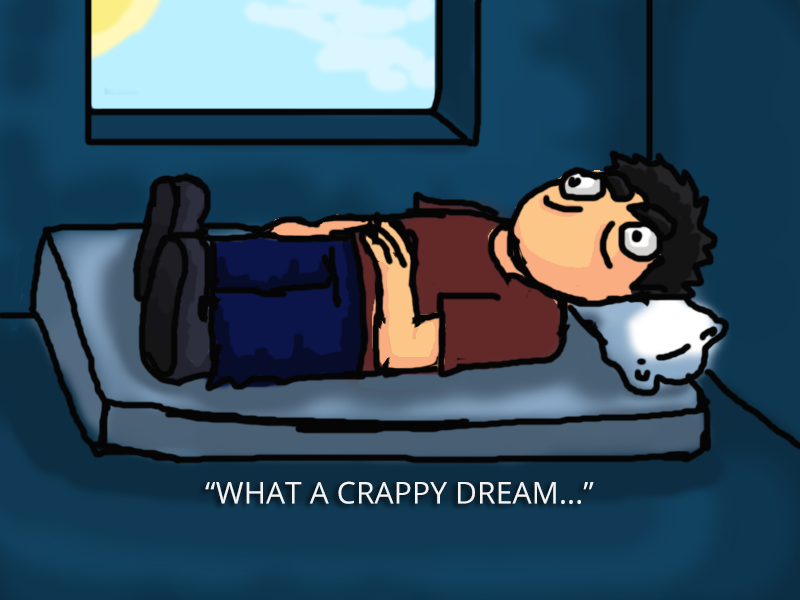
<style>
.page{position:relative;width:800px;height:600px}
.page>*{position:absolute;margin:0}
.t1{font:30px "OpenSans";letter-spacing:0.005em;color:#f3f3f3}
</style>
<div class="page">
<p class="t1" style="left:205px;top:481px;width:389px;height:23px">“WHAT A CRAPPY DREAM...”</p>
</div>
